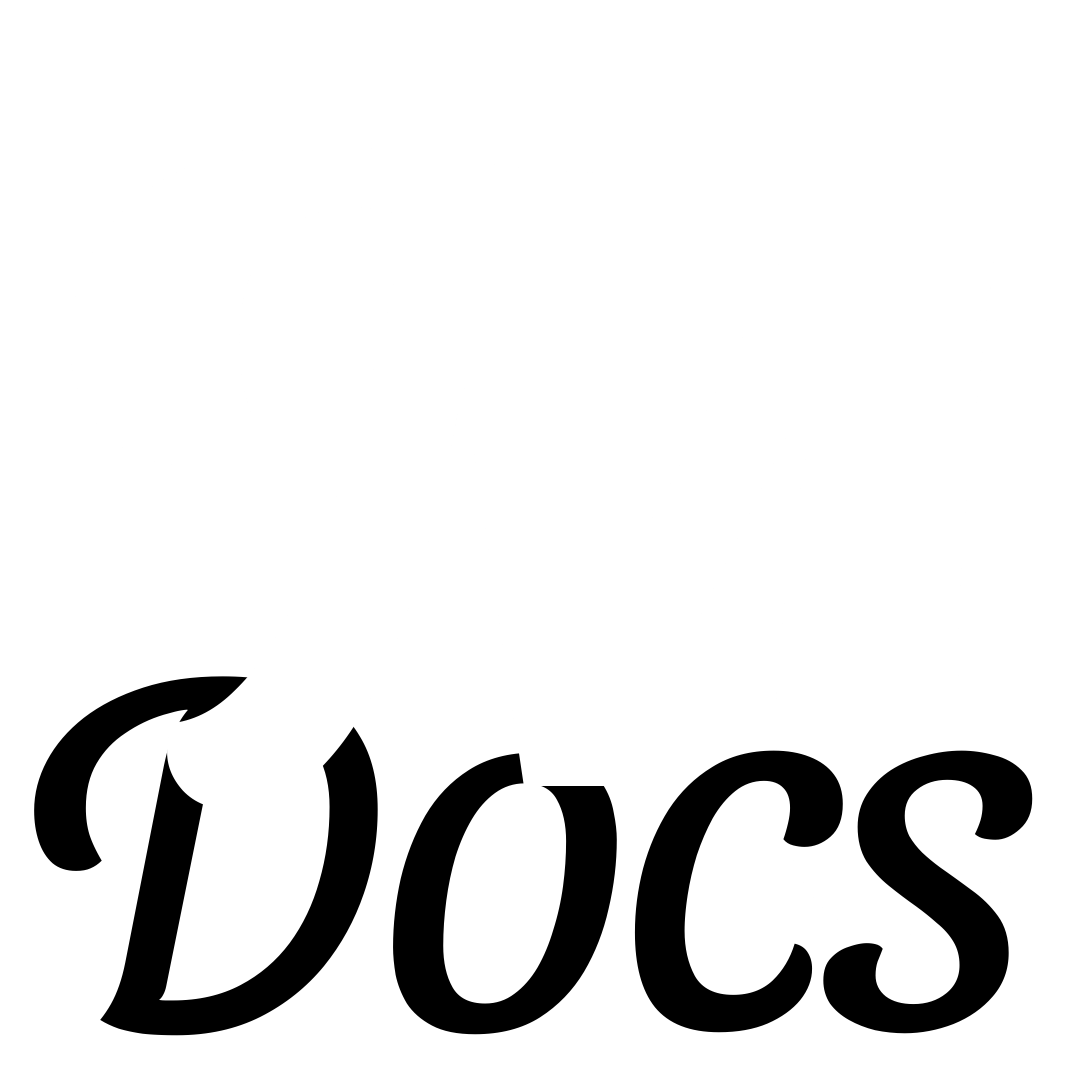
<style>
.page{position:relative;width:1080px;height:1080px;background:#ffffff}
.page>*{position:absolute;margin:0}
.t1{font:512px "SansitaSwashed-Light";letter-spacing:-0.042em;color:#000000}
</style>
<div class="page">
<p class="t1" style="left:34px;top:676px;width:583px;height:360px">Do</p>
<p class="t1" style="left:634px;top:750px;width:399px;height:284px">cs</p>
</div>
